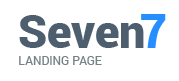
<style>
.page{position:relative;width:179px;height:81px;background:#ffffff}
.page>*{position:absolute;margin:0}
.t1{font:46.6px "Roboto-Black";color:#4d5e6f}
.t2{font:46.6px "Roboto-Black";color:#268eff}
.t3{font:12px "Roboto-Regular";color:#768385;text-transform:uppercase}
</style>
<div class="page">
<p class="t1" style="left:19px;top:15px;width:125px;height:33px">Seven</p>
<p class="t2" style="left:141px;top:14px;width:25px;height:34px">7</p>
<p class="t3" style="left:19px;top:56px;width:83px;height:9px">landing page</p>
</div>
